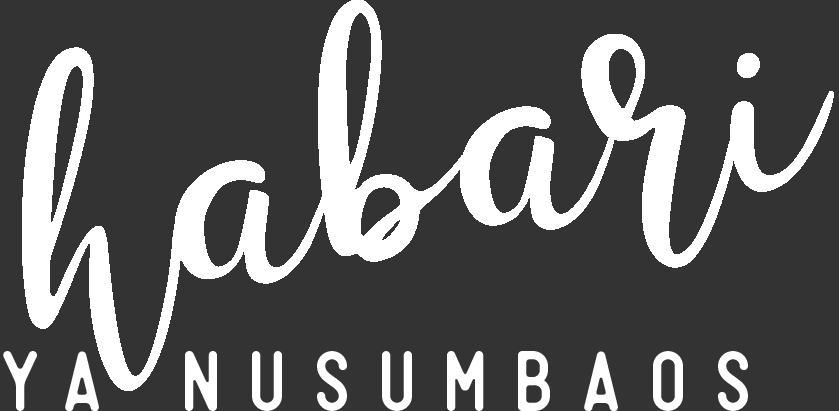
<style>
.page{position:relative;width:839px;height:411px;background:#333333}
.page>*{position:absolute;margin:0}
.t1{font:458.3px "StorylineScript";color:#ffffff}
.t2{font:83.3px "Original";letter-spacing:0.32em;color:#ffffff}
</style>
<div class="page">
<p class="t1" style="left:22px;top:0px;width:812px;height:391px">habari</p>
<p class="t2" style="left:3px;top:351px;width:745px;height:61px">Ya nusumbaos</p>
</div>
